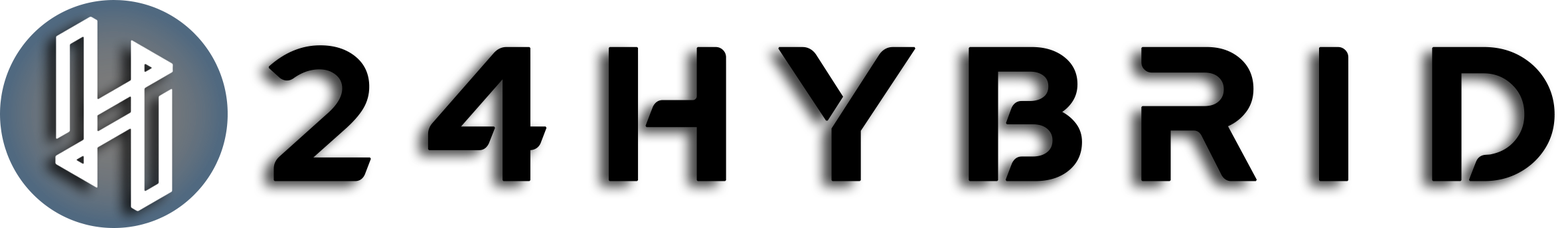
<style>
.page{position:relative;width:1568px;height:228px;background:#ffffff}
.page>*{position:absolute;margin:0}
.t1{font:188.3px "NevanRUS";letter-spacing:0.2em;color:#000000;font-weight:bold}
.t2{font:188.3px "NevanRUS";color:#000000;font-weight:bold}
</style>
<div class="page">
<p class="t1" style="left:268px;top:45px;width:1287px;height:136px">24HYBRI<span class="t2">D</span></p>
</div>
